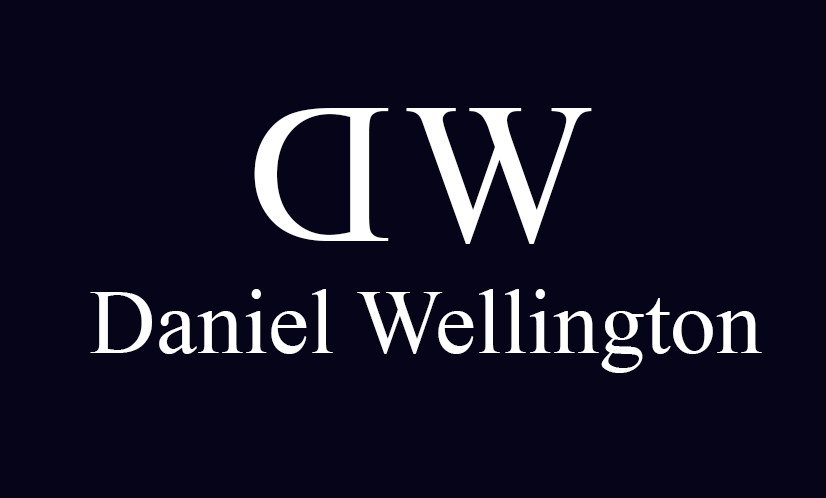
<style>
.page{position:relative;width:826px;height:498px;background:#060419}
.page>*{position:absolute;margin:0}
.t1{font:200px "TimesNewRomanPSMT";color:#ffffff}
.t2{font:92px "TimesNewRomanPSMT";color:#ffffff}
</style>
<div class="page">
<p class="t1" style="left:254px;top:108px;width:135px;height:133px;rotate:180deg">D</p>
<p class="t1" style="left:406px;top:108px;width:186px;height:136px">W</p>
<p class="t2" style="left:90px;top:289px;width:672px;height:84px">Daniel Wellington</p>
</div>
